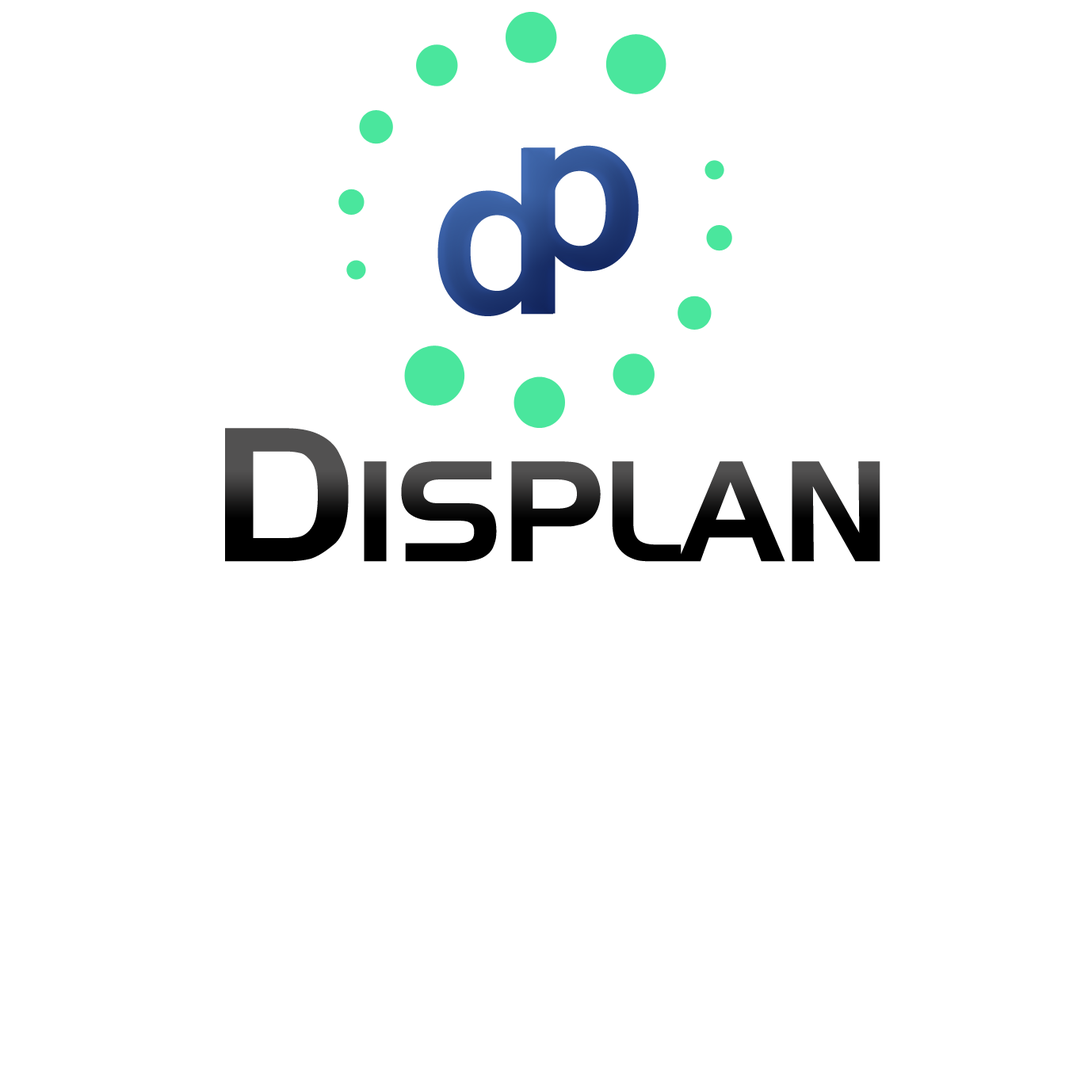
<style>
.page{position:relative;width:1092px;height:1092px;background:#ffffff}
.page>*{position:absolute;margin:0}
.t1{font:138.7px "AeroRegularSWFTE"}
.t2{font:184.9px "AeroRegularSWFTE"}
</style>
<div class="page">
<p class="t1" style="left:225px;top:428px;width:655px;height:134px"><span class="t2">D</span>ISPLAN</p>
</div>
